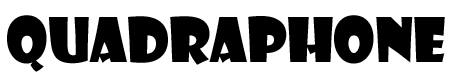
<style>
.page{position:relative;width:454px;height:77px;background:#ffffff}
.page>*{position:absolute;margin:0}
.t1{font:60px "ShowcardGothic-Reg";color:#000000}
</style>
<div class="page">
<p class="t1" style="left:7px;top:15px;width:438px;height:57px">QUADRAPHONE</p>
</div>
